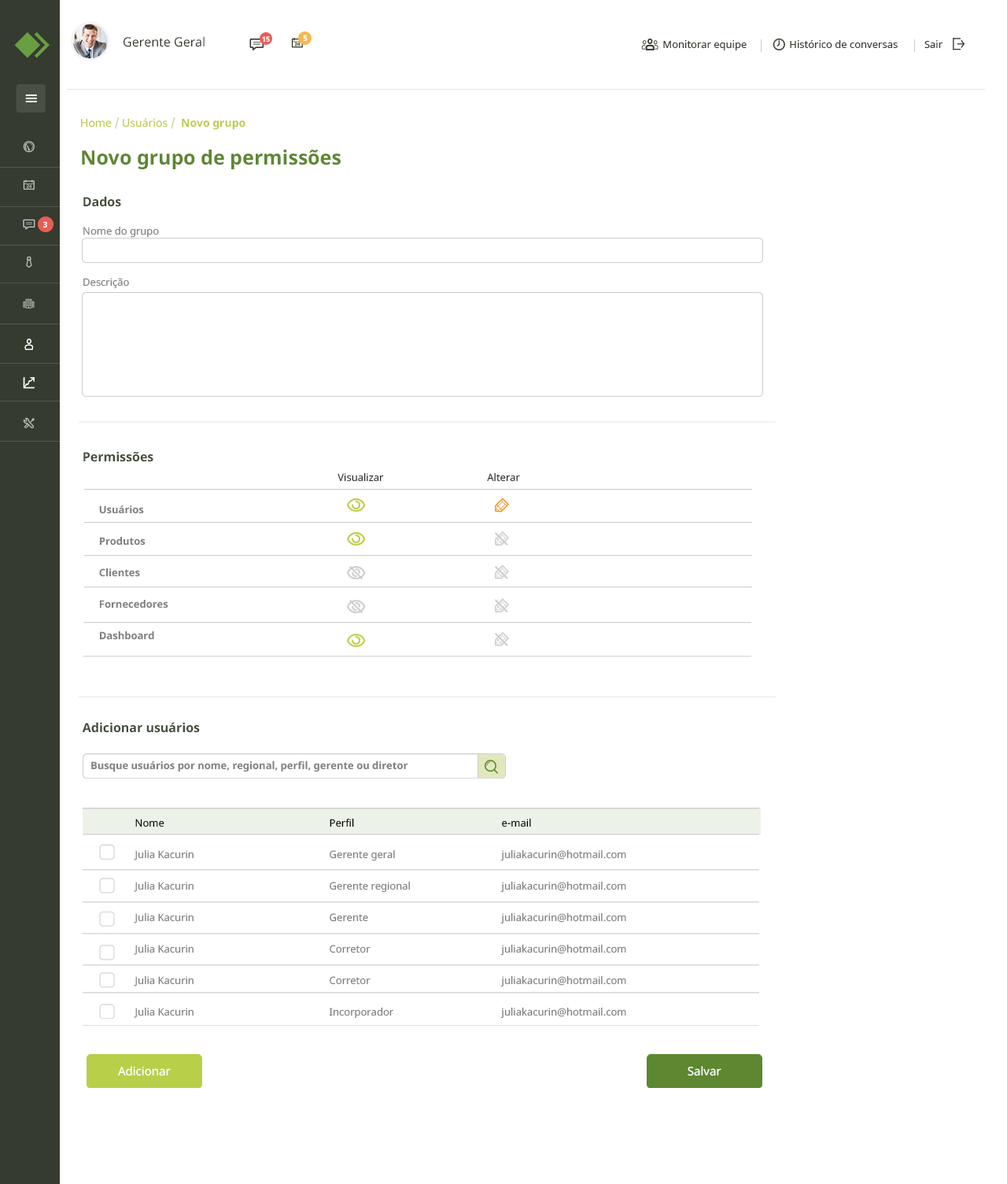
<style>
.page{position:relative;width:1007px;height:1184px;background:#ffffff}
.page>*{position:absolute;margin:0}
.t1{font:12.6px "NotoSans";color:#353b2f}
.t2{font:7.1px "NotoSans-Bold";color:#ffffff}
.t3{font:7.9px "NotoSans-Bold";color:#ffffff}
.t4{font:10.2px "NotoSans";color:#353b2f}
.t5{font:11px "NotoSans-Bold";color:#b8cf49}
.t6{font:11px "NotoSans";color:#b8cf49}
.t7{font:11px "NotoSans";color:#c7cfa1}
.t8{font:19.7px "NotoSans-Bold";color:#5d8730}
.t9{font:12.6px "NotoSans-Bold";color:#424d38}
.t10{font:10.2px/51.2px "NotoSans";color:#808080}
.t11{font:10.2px "NotoSans";color:#333333}
.t12{font:10.2px/31.5px "NotoSans-Bold";color:#808080}
.t13{font:10.2px "NotoSans-Bold";color:#808080}
.t14{font:10.2px/31.5px "NotoSans";color:#808080}
.t15{font:10.2px/31.5px "NotoSans";color:#000000}
.t16{font:11.8px "NotoSans";color:#ffffff}
</style>
<div class="page">
<p class="t1" style="left:124px;top:36px;width:81px;height:11px">Gerente Geral</p>
<p class="t2" style="left:262px;top:36px;width:8px;height:6px">15</p>
<p class="t3" style="left:303px;top:35px;width:5px;height:7px">5</p>
<p class="t4" style="left:663px;top:40px;width:280px;height:10px">Monitorar equipe                Histórico de conversas          Sair</p>
<p class="t5" style="left:81px;top:117px;width:165px;height:13px"><span class="t6">Home </span><span class="t7">/</span><span class="t6"> Usuários </span><span class="t7">/  </span>Novo grupo</p>
<p class="t8" style="left:82px;top:150px;width:259px;height:19px">Novo grupo de permissões</p>
<p class="t9" style="left:83px;top:196px;width:38px;height:11px">Dados</p>
<p class="t3" style="left:43px;top:221px;width:4px;height:7px">3</p>
<p class="t10" style="left:83px;top:226px;width:76px;height:63px">Nome do grupo<br>Descrição</p>
<p class="t9" style="left:83px;top:451px;width:70px;height:11px">Permissões</p>
<p class="t11" style="left:338px;top:472px;width:46px;height:10px">Visualizar</p>
<p class="t11" style="left:487px;top:472px;width:33px;height:10px">Alterar</p>
<p class="t12" style="left:99px;top:504px;width:69px;height:136px">Usuários<br>Produtos<br>Clientes<br>Fornecedores<br>Dashboard</p>
<p class="t9" style="left:82px;top:722px;width:118px;height:11px">Adicionar usuários</p>
<p class="t13" style="left:91px;top:760px;width:317px;height:12px">Busque usuários por nome, regional, perfil, gerente ou diretor</p>
<p class="t14" style="left:134px;top:819px;width:60px;height:199px"><span class="t15">Nome<br></span>Julia Kacurin<br>Julia Kacurin<br>Julia Kacurin<br>Julia Kacurin<br>Julia Kacurin<br>Julia Kacurin</p>
<p class="t14" style="left:329px;top:818px;width:81px;height:200px"><span class="t15">Perfil<br></span>Gerente geral<br>Gerente regional<br>Gerente<br>Corretor<br>Corretor<br>Incorporador</p>
<p class="t14" style="left:501px;top:818px;width:125px;height:200px"><span class="t15">e-mail<br></span>juliakacurin@hotmail.com<br>juliakacurin@hotmail.com<br>juliakacurin@hotmail.com<br>juliakacurin@hotmail.com<br>juliakacurin@hotmail.com<br>juliakacurin@hotmail.com</p>
<p class="t16" style="left:118px;top:1066px;width:53px;height:10px">Adicionar</p>
<p class="t16" style="left:688px;top:1066px;width:34px;height:10px">Salvar</p>
</div>
